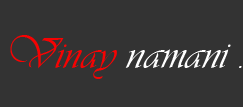
<style>
.page{position:relative;width:243px;height:107px;background:#333333}
.page>*{position:absolute;margin:0}
.t1{font:45px "Vivaldii";color:#ffffff}
.t2{font:45px "Vivaldii";color:#f70202}
</style>
<div class="page">
<p class="t1" style="left:10px;top:35px;width:232px;height:44px"><span class="t2">Vinay </span>namani .</p>
</div>
